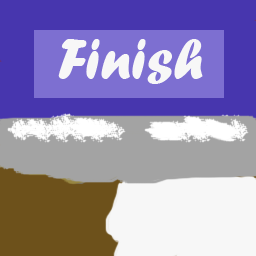
<style>
.page{position:relative;width:256px;height:256px;background:#4736ae}
.page>*{position:absolute;margin:0}
.t1{font:60px "ForteMT";color:#f7f7f7}
</style>
<div class="page">
<p class="t1" style="left:58px;top:39px;width:145px;height:45px">Finish</p>
</div>
